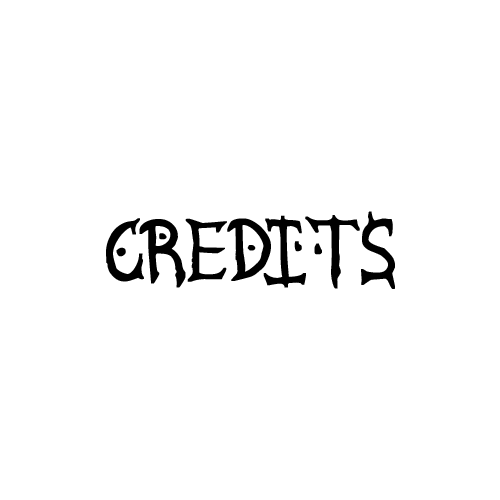
<style>
.page{position:relative;width:500px;height:500px;background:#ffffff}
.page>*{position:absolute;margin:0}
.t1{font:72px "SatanycDemoniacSt";color:#000000;font-weight:bold}
</style>
<div class="page">
<p class="t1" style="left:106px;top:211px;width:289px;height:78px">Credits</p>
</div>
